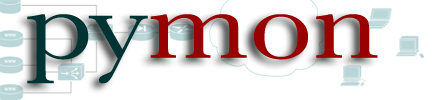
<style>
.page{position:relative;width:435px;height:100px;background:#ffffff}
.page>*{position:absolute;margin:0}
.t1{font:104.2px "Baskerville";color:#990000;scale:1.22 1}
.t2{font:104.2px "Baskerville";color:#003333;scale:1.22 1}
</style>
<div class="page">
<p class="t1" style="left:27px;top:14px;width:351px;height:70px"><span class="t2">py</span>mon</p>
</div>
